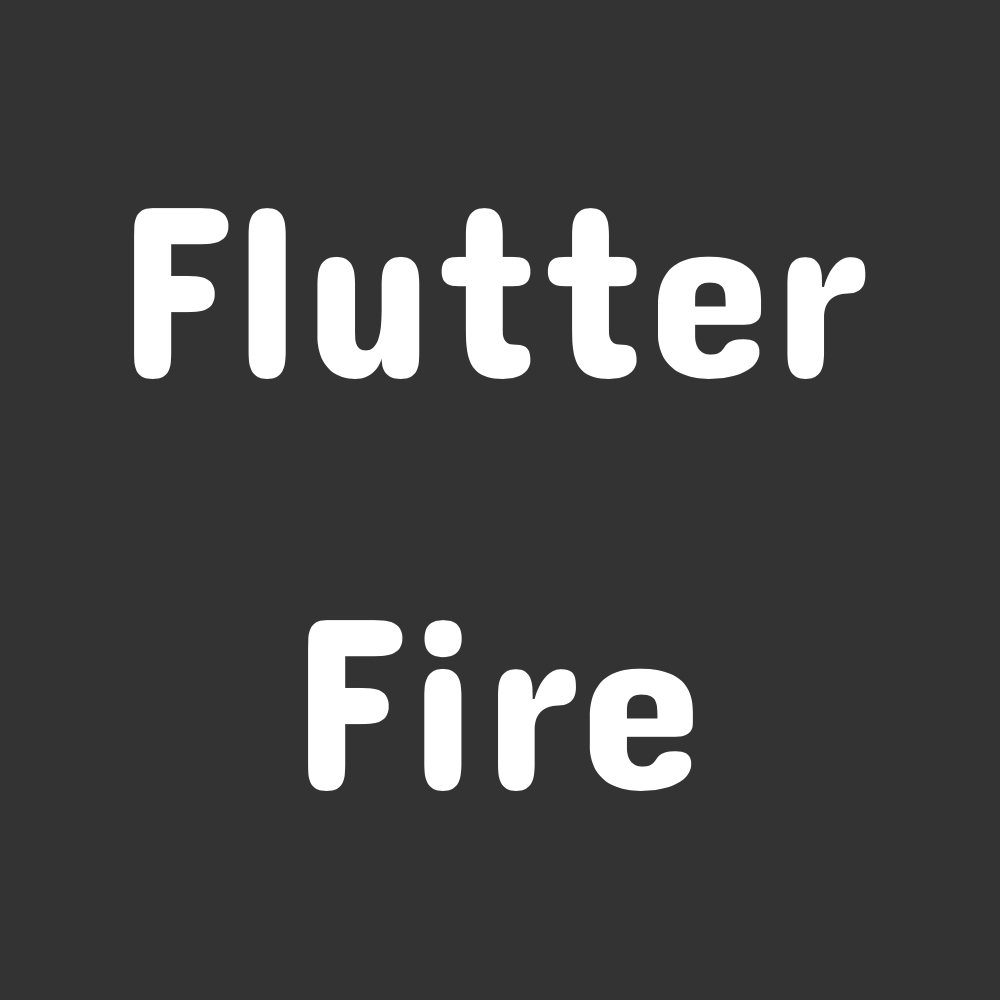
<style>
.page{position:relative;width:1000px;height:1000px;background:#333333}
.page>*{position:absolute;margin:0}
.t1{font:250px "ConcertOne-Regular";color:#ffffff}
</style>
<div class="page">
<p class="t1" style="left:134px;top:208px;width:732px;height:171px">Flutter</p>
<p class="t1" style="left:308px;top:620px;width:385px;height:171px">Fire</p>
</div>
